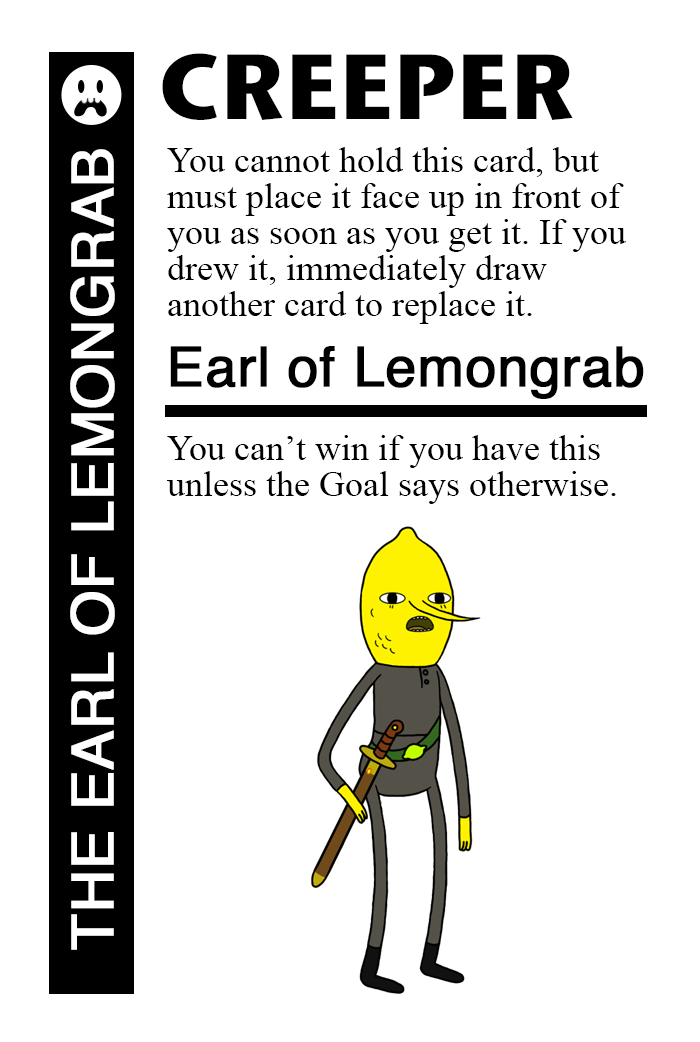
<style>
.page{position:relative;width:700px;height:1042px;background:#ffffff}
.page>*{position:absolute;margin:0}
.t1{font:92px "StoneSansITC-Bold";color:#000000}
.t2{font:58px "Helvetica";color:#ffffff;font-weight:bold}
.t3{font:36px/36px "TimesNewRomanPSMT";color:#000000}
.t4{font:55px "Helvetica";color:#000000;font-weight:bold}
</style>
<div class="page">
<p class="t1" style="left:162px;top:53px;width:411px;height:67px">CREEPER</p>
<p class="t2" style="left:70px;top:149px;width:45px;height:801px;rotate:-90deg">THE EARL OF LEMONGRAB</p>
<p class="t3" style="left:167px;top:147px;width:459px;height:177px">You cannot hold this card, but<br>must place it face up in front of<br>you as soon as you get it. If you <br>drew it, immediately draw<br>another card to replace it.</p>
<p class="t4" style="left:170px;top:346px;width:474px;height:53px">Earl of Lemongrab</p>
<p class="t3" style="left:167px;top:435px;width:449px;height:69px">You can’t win if you have this <br>unless the Goal says otherwise.</p>
</div>
